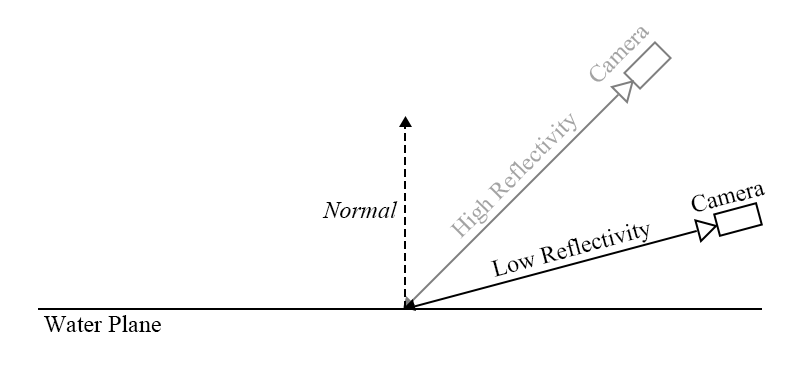
<style>
.page{position:relative;width:800px;height:374px;background:#ffffff}
.page>*{position:absolute;margin:0}
.t1{font:24px "TimesNewRomanPSMT";color:#a3a3a3}
.t2{font:24px "TimesNewRomanPSMT";color:#000000}
.t3{font:24px "TimesNewRomanPS-ItalicMT";color:#000000}
</style>
<div class="page">
<p class="t1" style="left:589px;top:27px;width:61px;height:55px;rotate:-45deg">Camera</p>
<p class="t1" style="left:449px;top:113px;width:128px;height:126px;rotate:-45deg">High Reflectivity</p>
<p class="t2" style="left:691px;top:184px;width:75px;height:28px;rotate:-15deg">Camera</p>
<p class="t3" style="left:322px;top:201px;width:76px;height:17px">Normal</p>
<p class="t2" style="left:490px;top:224px;width:160px;height:53px;rotate:-15deg">Low Reflectivity</p>
<p class="t2" style="left:43px;top:315px;width:118px;height:17px">Water Plane</p>
</div>
